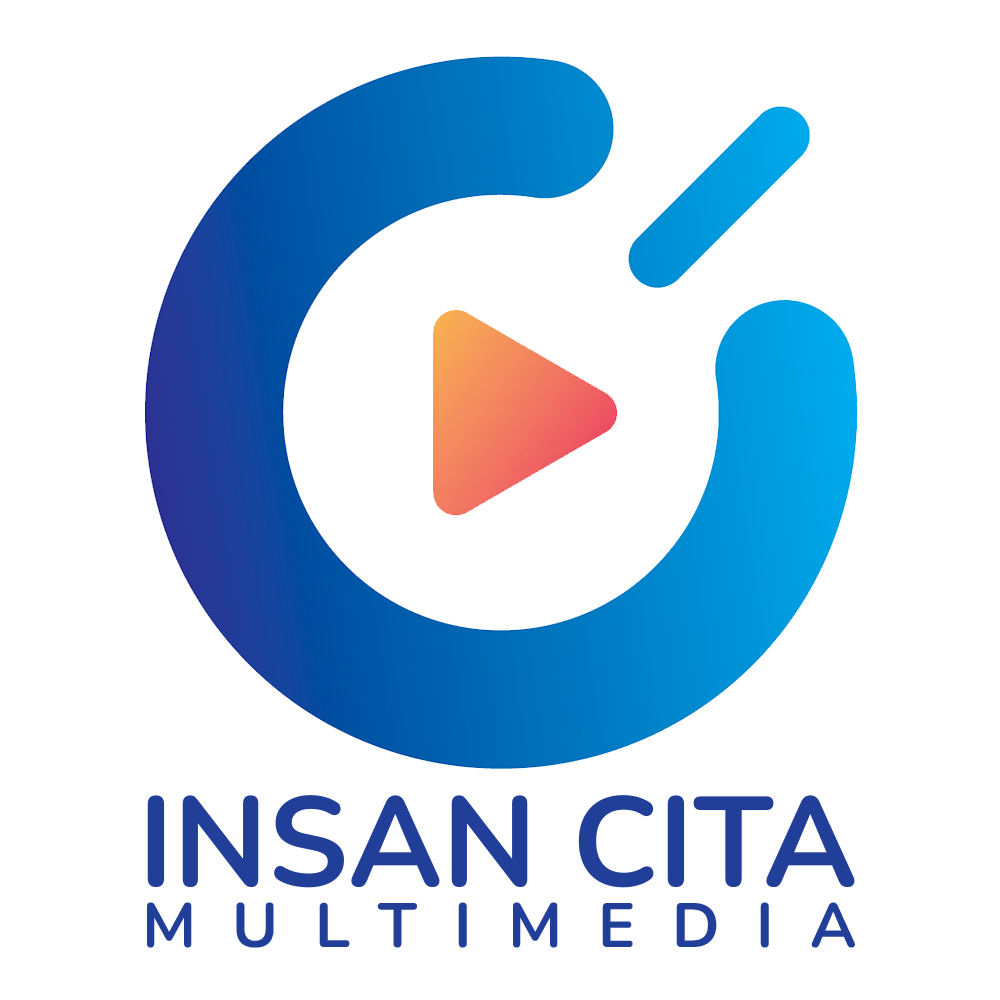
<style>
.page{position:relative;width:1000px;height:1000px;background:#ffffff}
.page>*{position:absolute;margin:0}
.t1{font:127.1px "Nunito-Bold";color:#213e99}
.t2{font:62.4px "Nunito-Bold";letter-spacing:0.585em;color:#213e99}
</style>
<div class="page">
<p class="t1" style="left:147px;top:795px;width:708px;height:93px">INSAN CITA</p>
<p class="t2" style="left:147px;top:902px;width:708px;height:46px">MULTIMEDIA</p>
</div>
